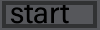
<style>
.page{position:relative;width:100px;height:30px;background:#56575b}
.page>*{position:absolute;margin:0}
.t1{font:30px "AcuminConcept-Regular";color:#000000}
</style>
<div class="page">
<p class="t1" style="left:10px;top:3px;width:59px;height:21px">start</p>
</div>
